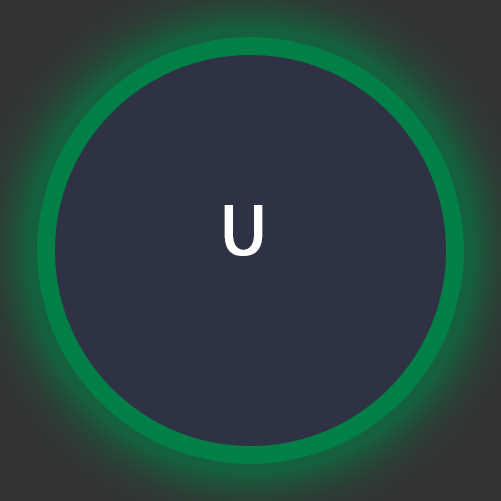
<style>
.page{position:relative;width:501px;height:501px;background:#2f3244}
.page>*{position:absolute;margin:0}
.t1{font:72px "MyriadPro-Regular";color:#ffffff;text-transform:uppercase;font-weight:bold}
</style>
<div class="page">
<p class="t1" style="left:224px;top:205px;width:39px;height:51px">U</p>
</div>
